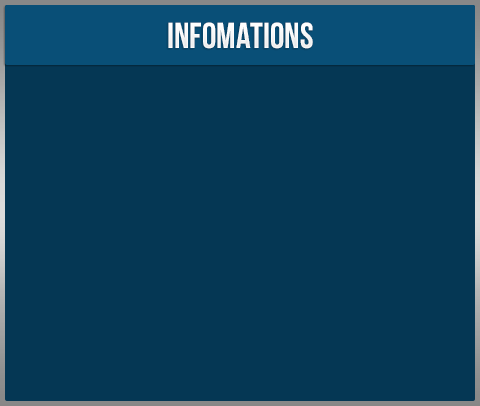
<style>
.page{position:relative;width:480px;height:406px;background:#053754}
.page>*{position:absolute;margin:0}
.t1{font:36px "UTM-Bebas";color:#ffffff}
</style>
<div class="page">
<p class="t1" style="left:168px;top:22px;width:145px;height:27px">infomations</p>
</div>
